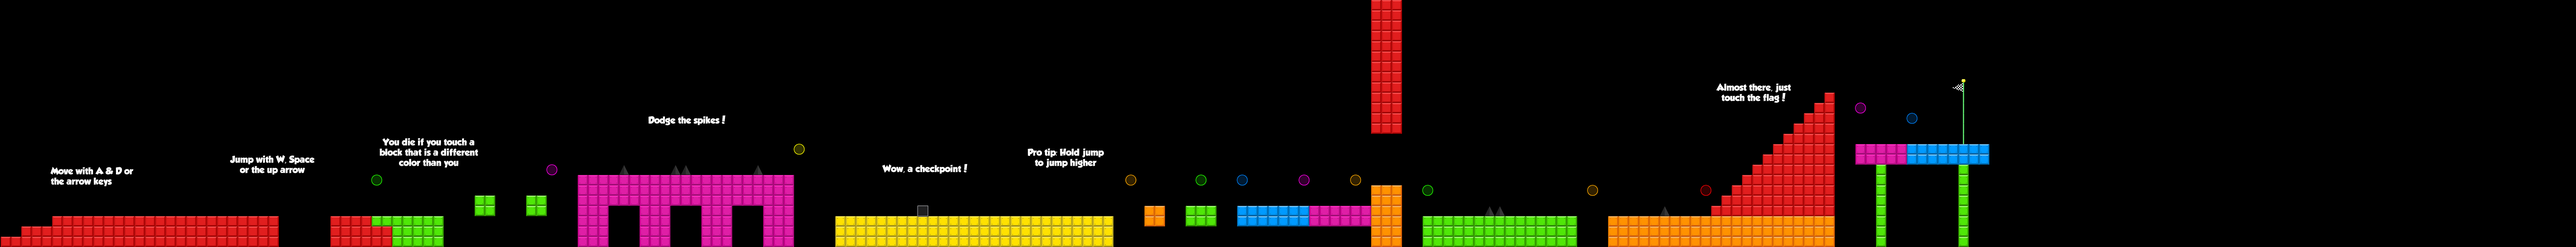
<style>
.page{position:relative;width:2576px;height:247px;background:#000000}
.page>*{position:absolute;margin:0}
.t1{font:8.6px "GROBOLD";color:#ffffff}
</style>
<div class="page">
<p class="t1" style="left:1716px;top:83px;width:75px;height:20px;text-align:center">Almost there, just touch the flag!</p>
<p class="t1" style="left:649px;top:116px;width:76px;height:10px">Dodge the spikes!</p>
<p class="t1" style="left:380px;top:138px;width:98px;height:30px;text-align:center">You die if you touch a block that is a different color than you</p>
<p class="t1" style="left:1028px;top:148px;width:76px;height:20px;text-align:center">Pro tip: Hold jump  to jump higher</p>
<p class="t1" style="left:230px;top:155px;width:85px;height:20px;text-align:center">Jump with W, Space or the up arrow</p>
<p class="t1" style="left:50px;top:167px;width:83px;height:19px">Move with A &amp; D or<br>the arrow keys</p>
<p class="t1" style="left:882px;top:164px;width:85px;height:10px">Wow, a checkpoint!</p>
</div>
